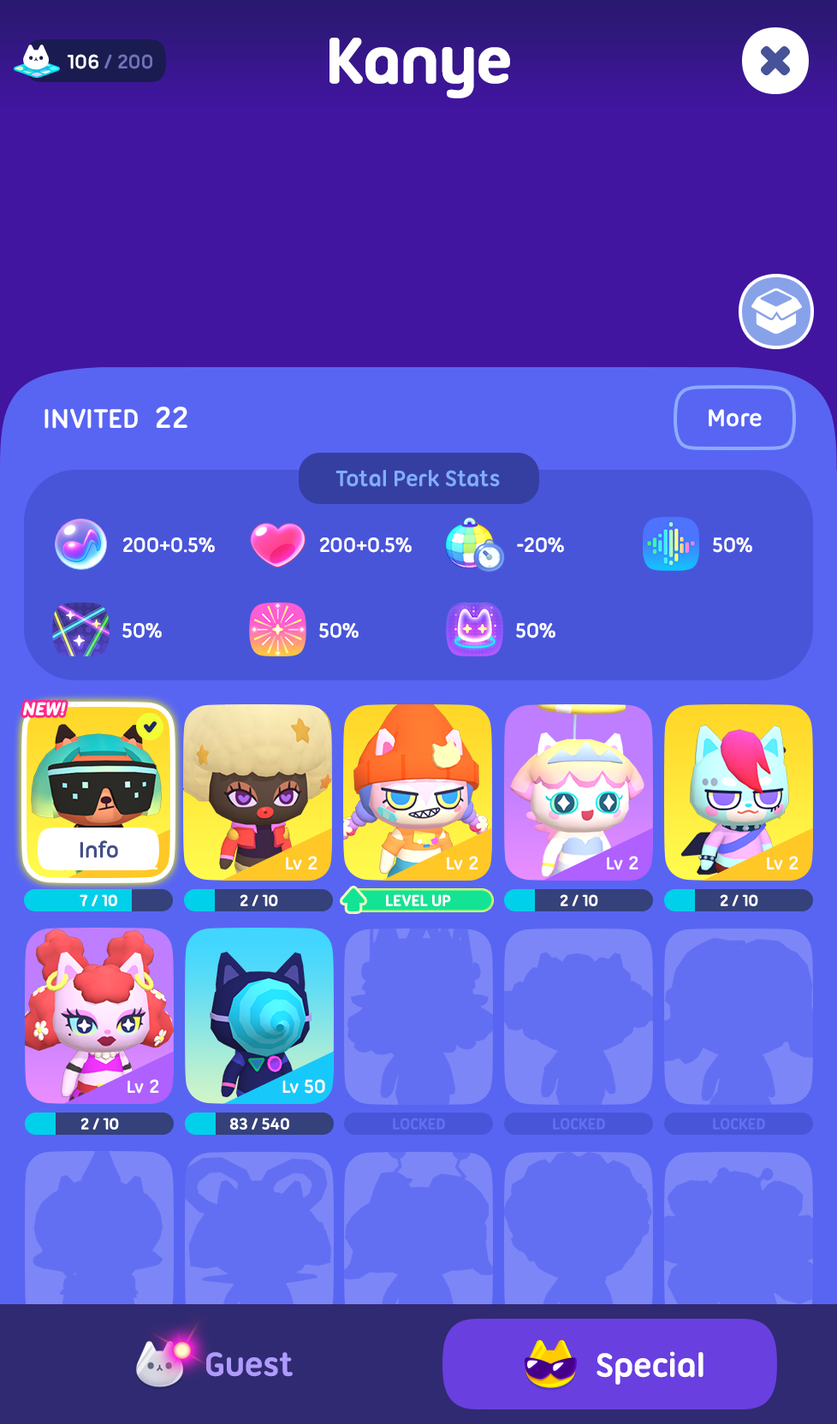
<style>
.page{position:relative;width:837px;height:1424px}
.page>*{position:absolute;margin:0}
.t1{font:68.5px "UbuntuTitling-Bold";letter-spacing:-0.025em;color:#ffffff;font-weight:bold}
.t2{font:21.4px "UbuntuTitling-Bold";letter-spacing:-0.025em;color:#6f73bc;text-transform:uppercase}
.t3{font:21.4px "UbuntuTitling-Bold";letter-spacing:-0.025em;color:#ffffff;text-transform:uppercase}
.t4{font:29.1px "UbuntuTitling-Bold";letter-spacing:-0.025em;color:#ffffff;text-transform:uppercase}
.t5{font:32.5px "UbuntuTitling-Bold";letter-spacing:-0.025em;color:#ffffff;text-transform:uppercase}
.t6{font:25.7px "UbuntuTitling-Bold";letter-spacing:-0.025em;color:#ffffff}
.t7{font:24px "UbuntuTitling-Bold";letter-spacing:-0.025em;color:#81adff}
.t8{font:22.3px "UbuntuTitling-Bold";letter-spacing:-0.025em;color:#ffffff}
.t9{font:18.8px "UbuntuTitling-Bold";letter-spacing:-0.03em;color:#ffffff;text-transform:uppercase;font-weight:bold;font-style:italic}
.t10{font:24px "UbuntuTitling-Bold";letter-spacing:-0.025em;color:#444f88}
.t11{font:18.8px "UbuntuTitling-Bold";letter-spacing:-0.025em;color:#ffffff}
.t12{font:20.5px "UbuntuTitling-Bold";letter-spacing:-0.025em;color:#ffffff}
.t13{font:17.1px "UbuntuTitling-Bold";letter-spacing:-0.025em;color:#ffffff}
.t14{font:17.1px "UbuntuTitling-Bold";letter-spacing:-0.025em;color:#ffffff;text-transform:uppercase}
.t15{font:17.1px "UbuntuTitling-Bold";letter-spacing:-0.025em;color:#636ff3;text-transform:uppercase}
.t16{font:36px "UbuntuTitling-Bold";letter-spacing:-0.025em;color:#af9bff}
.t17{font:36px "UbuntuTitling-Bold";letter-spacing:-0.025em;color:#ffffff}
</style>
<div class="page">
<p class="t1" style="left:330px;top:38px;width:180px;height:60px">Kanye</p>
<p class="t2" style="left:67px;top:54px;width:85px;height:15px"><span class="t3">106 </span>/ 200</p>
<p class="t4" style="left:45px;top:407px;width:142px;height:22px">Invited  <span class="t5">22</span></p>
<p class="t6" style="left:709px;top:409px;width:53px;height:18px">More</p>
<p class="t7" style="left:336px;top:470px;width:164px;height:17px">Total Perk Stats</p>
<p class="t8" style="left:123px;top:538px;width:92px;height:15px">200+0.5%</p>
<p class="t8" style="left:320px;top:538px;width:92px;height:15px">200+0.5%</p>
<p class="t8" style="left:517px;top:538px;width:47px;height:15px">-20%</p>
<p class="t8" style="left:713px;top:538px;width:39px;height:15px">50%</p>
<p class="t8" style="left:122px;top:623px;width:40px;height:16px">50%</p>
<p class="t8" style="left:319px;top:623px;width:40px;height:16px">50%</p>
<p class="t8" style="left:516px;top:623px;width:40px;height:16px">50%</p>
<p class="t9" style="left:23px;top:702px;width:43px;height:14px">New!</p>
<p class="t10" style="left:80px;top:841px;width:38px;height:18px">Info</p>
<p class="t11" style="left:286px;top:856px;width:32px;height:15px">Lv<span class="t12"> 2</span></p>
<p class="t11" style="left:447px;top:856px;width:32px;height:15px">Lv<span class="t12"> 2</span></p>
<p class="t11" style="left:607px;top:856px;width:32px;height:15px">Lv<span class="t12"> 2</span></p>
<p class="t11" style="left:767px;top:856px;width:32px;height:15px">Lv<span class="t12"> 2</span></p>
<p class="t13" style="left:80px;top:895px;width:37px;height:11px">7 / 10</p>
<p class="t13" style="left:240px;top:895px;width:38px;height:11px">2 / 10</p>
<p class="t14" style="left:386px;top:895px;width:65px;height:11px">Level Up</p>
<p class="t13" style="left:560px;top:895px;width:38px;height:11px">2 / 10</p>
<p class="t13" style="left:720px;top:895px;width:38px;height:11px">2 / 10</p>
<p class="t11" style="left:128px;top:1079px;width:31px;height:15px">Lv<span class="t12"> 2</span></p>
<p class="t11" style="left:282px;top:1079px;width:43px;height:15px">Lv<span class="t12"> 50</span></p>
<p class="t13" style="left:80px;top:1118px;width:39px;height:12px">2 / 10</p>
<p class="t13" style="left:229px;top:1118px;width:60px;height:12px">83 / 540</p>
<p class="t15" style="left:393px;top:1118px;width:52px;height:12px">Locked</p>
<p class="t15" style="left:553px;top:1118px;width:52px;height:12px">Locked</p>
<p class="t15" style="left:713px;top:1118px;width:52px;height:12px">Locked</p>
<p class="t16" style="left:206px;top:1352px;width:87px;height:25px">Guest</p>
<p class="t17" style="left:597px;top:1352px;width:107px;height:33px">Special</p>
</div>
